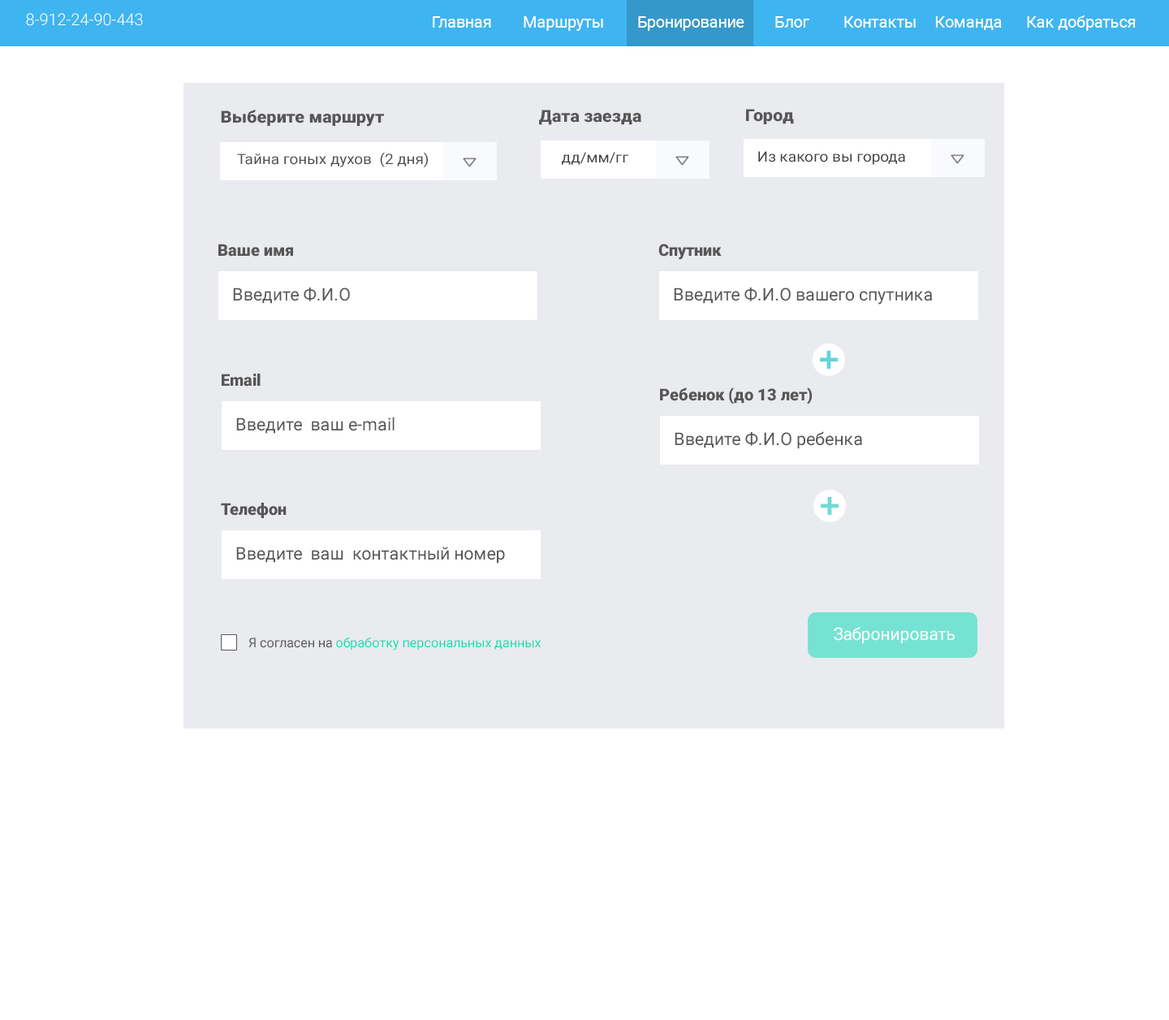
<style>
.page{position:relative;width:1169px;height:1020px;background:#ffffff}
.page>*{position:absolute;margin:0}
.t1{font:16.2px "Roboto-Light";color:#ffffff}
.t2{font:15.9px "Roboto-Regular";color:#ffffff}
.t3{font:16.3px "Roboto-Black";color:#565656;scale:1.07 1}
.t4{font:14.3px "Roboto-Regular";color:#4d4d4d;scale:1.07 1}
.t5{font:14.3px "Roboto-Regular";color:#3f3f3f;scale:1.07 1}
.t6{font:16.2px "Roboto-Black";color:#565656}
.t7{font:17.4px "Roboto-Regular";color:#575757}
.t8{font:17px "Roboto-Regular";color:#ffffff}
.t9{font:13.2px "Roboto-Regular";color:#08e0b0}
.t10{font:13.2px "Roboto-Regular";color:#575757}
</style>
<div class="page">
<p class="t1" style="left:26px;top:13px;width:117px;height:13px">8-912-24-90-443</p>
<p class="t2" style="left:433px;top:15px;width:703px;height:16px">Главная  Маршруты  Бронирование  Блог  Контакты Команда  Как добраться</p>
<p class="t3" style="left:221px;top:110px;width:163px;height:17px">Выберите маршрут</p>
<p class="t3" style="left:539px;top:110px;width:102px;height:15px">Дата заезда</p>
<p class="t3" style="left:746px;top:109px;width:48px;height:15px">Город</p>
<p class="t4" style="left:237px;top:152px;width:191px;height:15px">Тайна гоных духов  (2 дня)</p>
<p class="t5" style="left:562px;top:152px;width:66px;height:13px">дд/мм/гг</p>
<p class="t5" style="left:758px;top:151px;width:147px;height:14px">Из какого вы города</p>
<p class="t6" style="left:218px;top:244px;width:75px;height:13px">Ваше имя</p>
<p class="t6" style="left:659px;top:244px;width:63px;height:16px">Спутник</p>
<p class="t7" style="left:233px;top:287px;width:117px;height:17px">Введите Ф.И.О</p>
<p class="t7" style="left:674px;top:287px;width:258px;height:17px">Введите Ф.И.О вашего спутника</p>
<p class="t6" style="left:222px;top:374px;width:39px;height:12px">Email</p>
<p class="t6" style="left:660px;top:387px;width:152px;height:17px">Ребенок (до 13 лет)</p>
<p class="t7" style="left:236px;top:417px;width:159px;height:17px">Введите  ваш e-mail</p>
<p class="t7" style="left:675px;top:431px;width:187px;height:18px">Введите Ф.И.О ребенка</p>
<p class="t6" style="left:221px;top:503px;width:66px;height:15px">Телефон</p>
<p class="t7" style="left:236px;top:546px;width:269px;height:18px">Введите  ваш  контактный номер</p>
<p class="t8" style="left:834px;top:627px;width:121px;height:17px">Забронировать</p>
<p class="t9" style="left:248px;top:637px;width:294px;height:13px"><span class="t10">Я согласен на </span>обработку персональных данных</p>
</div>
